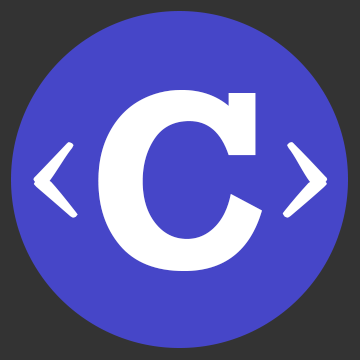
<style>
.page{position:relative;width:360px;height:360px;background:#4646c8}
.page>*{position:absolute;margin:0}
.t1{font:258.2px "Rockwell-Bold";color:#ffffff;scale:0.9 1}
.t2{font:181.7px "CalifornianFB-Bold";color:#ffffff}
</style>
<div class="page">
<p class="t1" style="left:98px;top:90px;width:164px;height:181px">C</p>
<p class="t2" style="left:33px;top:142px;width:295px;height:76px">&lt;    &gt;</p>
</div>
